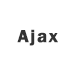
<style>
.page{position:relative;width:76px;height:76px;background:#ffffff}
.page>*{position:absolute;margin:0}
.t1{font:18px "FranklinGothic-Demi";letter-spacing:0.075em;color:#333333;font-weight:bold}
</style>
<div class="page">
<p class="t1" style="left:17px;top:29px;width:41px;height:17px">Ajax</p>
</div>
